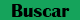
<style>
.page{position:relative;width:80px;height:20px;background:#15a35b}
.page>*{position:absolute;margin:0}
.t1{font:18.7px "BritannicBold";color:#000000}
</style>
<div class="page">
<p class="t1" style="left:12px;top:4px;width:58px;height:13px">Buscar</p>
</div>
